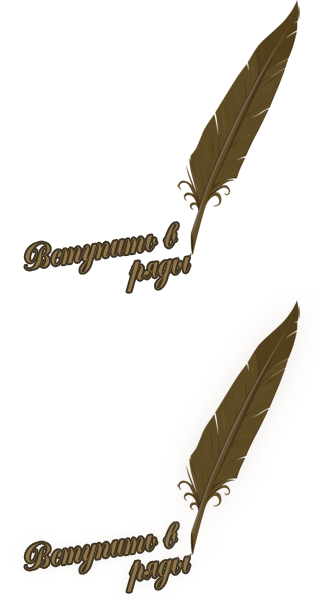
<style>
.page{position:relative;width:320px;height:600px;background:#ffffff}
.page>*{position:absolute;margin:0}
.t1{font:37.5px "MonikaScript";color:#907649}
</style>
<div class="page">
<p class="t1" style="left:25px;top:223px;width:153px;height:50px;rotate:-9deg">Вступить в</p>
<p class="t1" style="left:127px;top:257px;width:63px;height:35px;rotate:-9deg">ряды</p>
<p class="t1" style="left:25px;top:523px;width:153px;height:50px;rotate:-9deg">Вступить в</p>
<p class="t1" style="left:127px;top:557px;width:63px;height:35px;rotate:-9deg">ряды</p>
</div>
